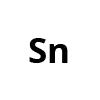
<style>
.page{position:relative;width:100px;height:100px;background:#ffffff}
.page>*{position:absolute;margin:0}
.t1{font:35px "OpenSans-Bold";color:#000000}
</style>
<div class="page">
<p class="t1" style="left:29px;top:38px;width:39px;height:25px">Sn</p>
</div>
